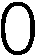
<style>
.page{position:relative;width:35px;height:56px;background:#ffffff}
.page>*{position:absolute;margin:0}
.t1{font:66px "OPPOSans-R";color:#000000}
</style>
<div class="page">
<p class="t1" style="left:1px;top:2px;width:34px;height:53px;rotate:180deg">0</p>
</div>
